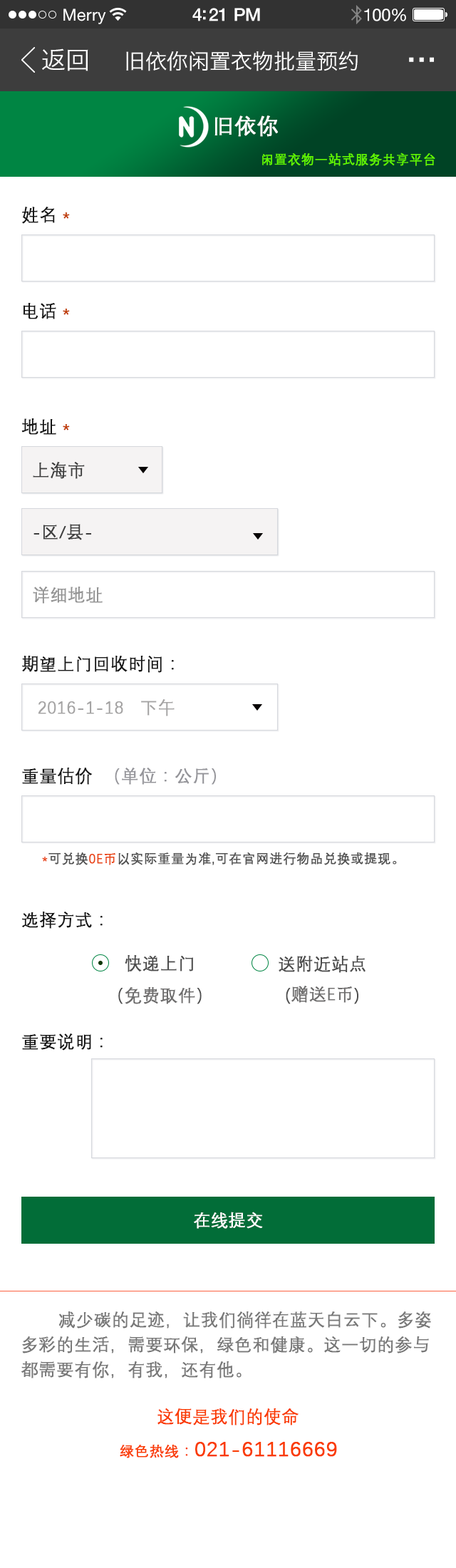
<style>
.page{position:relative;width:456px;height:1568px;background:#ffffff}
.page>*{position:absolute;margin:0}
.t1{font:24.2px "HiraginoSansGB-W3";color:#ffffff}
.t2{font:21.4px "HiraginoSansGB-W3";color:#ffffff}
.t3{font:42.8px "HiraginoSansGB-W3";color:#ffffff}
.t4{font:21.6px "DengXian-Regular";color:#fefefe;font-weight:bold}
.t5{font:12.8px "DengXian-Regular";color:#61f900;font-weight:bold}
.t6{font:17.1px "DengXian-Regular";color:#161616;font-weight:bold}
.t7{font:17.1px "DengXian-Regular";color:#bf3a00;font-weight:bold}
.t8{font:17.1px "DengXian-Regular";color:#3e3e3e;font-weight:bold}
.t9{font:17.1px "DengXian-Regular";color:#949494;font-weight:bold}
.t10{font:17.1px "DengXian-Regular";color:#a5a4a4;font-weight:bold}
.t11{font:17.1px "DengXian-Regular";color:#949499;font-weight:bold}
.t12{font:12.8px "DengXian-Regular";color:#505050;font-weight:bold}
.t13{font:12.8px "DengXian-Regular";color:#e9410e;font-weight:bold}
.t14{font:17.1px/32.1px "DengXian-Regular";color:#4c4c4c;font-weight:bold}
.t15{font:17.1px/32.1px "DengXian-Regular";color:#6e6d6d;font-weight:bold}
.t16{font:17.1px/29.9px "DengXian-Regular";color:#4c4c4c;font-weight:bold}
.t17{font:17.1px/29.9px "DengXian-Regular";color:#6e6d6d;font-weight:bold}
.t18{font:17.1px "DengXian-Regular";color:#ffffff;font-weight:bold}
.t19{font:17.1px/24.9px "DengXian-Regular";color:#787878;font-weight:bold}
.t20{font:17.1px "DengXian-Regular";color:#fa3b00;font-weight:bold}
.t21{font:21.4px "DengXian-Regular";color:#fa3b00;font-weight:bold}
.t22{font:14.3px "DengXian-Regular";color:#fa3b00;font-weight:bold}
</style>
<div class="page">
<p class="t1" style="left:42px;top:48px;width:46px;height:23px">返回</p>
<p class="t2" style="left:126px;top:51px;width:232px;height:20px">旧依你闲置衣物批量预约</p>
<p class="t3" style="left:409px;top:57px;width:25px;height:5px">...</p>
<p class="t4" style="left:215px;top:115px;width:63px;height:22px">旧依你</p>
<p class="t5" style="left:262px;top:153px;width:173px;height:13px">闲置衣物一站式服务共享平台</p>
<p class="t6" style="left:22px;top:207px;width:48px;height:17px">姓名<span class="t7"> *</span></p>
<p class="t6" style="left:23px;top:303px;width:47px;height:16px">电话<span class="t7"> *</span></p>
<p class="t6" style="left:21px;top:418px;width:49px;height:17px">地址<span class="t7"> *</span></p>
<p class="t8" style="left:33px;top:462px;width:52px;height:17px">上海市</p>
<p class="t8" style="left:33px;top:524px;width:58px;height:16px">-区/县-</p>
<p class="t9" style="left:33px;top:587px;width:70px;height:17px">详细地址</p>
<p class="t6" style="left:22px;top:656px;width:152px;height:17px">期望上门回收时间：</p>
<p class="t10" style="left:38px;top:699px;width:137px;height:17px">2016-1-18   下午</p>
<p class="t11" style="left:22px;top:768px;width:194px;height:17px"><span class="t6">重量估价  </span>（单位：公斤）</p>
<p class="t12" style="left:42px;top:852px;width:355px;height:13px"><span class="t13">*</span>可兑换<span class="t13">0E币</span>以实际重量为准,可在官网进行物品兑换或提现。</p>
<p class="t6" style="left:22px;top:912px;width:81px;height:17px">选择方式：</p>
<p class="t14" style="left:118px;top:955px;width:84px;height:49px;text-align:center">快递上门<br>（<span class="t15">免费取件</span>）</p>
<p class="t16" style="left:279px;top:956px;width:87px;height:48px;text-align:center">送附近站点<br>(<span class="t17">赠送E币</span>)</p>
<p class="t6" style="left:22px;top:1033px;width:81px;height:18px">重要说明：</p>
<p class="t18" style="left:194px;top:1212px;width:69px;height:17px">在线提交</p>
<p class="t19" style="left:21px;top:1311px;width:410px;height:67px">减少碳的足迹，让我们徜徉在蓝天白云下。多姿<br>多彩的生活，需要环保，绿色和健康。这一切的参与<br>都需要有你，有我，还有他。</p>
<p class="t20" style="left:158px;top:1408px;width:141px;height:17px">这便是我们的使命</p>
<p class="t21" style="left:120px;top:1442px;width:217px;height:16px"><span class="t22"> 绿色热线：</span>021-61116669</p>
</div>
